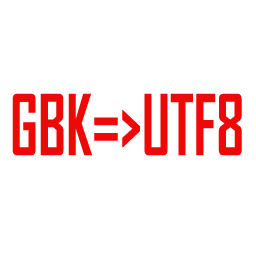
<style>
.page{position:relative;width:256px;height:256px;background:#ffffff}
.page>*{position:absolute;margin:0}
.t1{font:80px "AgencyFB-Bold";color:#ee0909;scale:0.75 1}
</style>
<div class="page">
<p class="t1" style="left:12px;top:93px;width:230px;height:63px">GBK=&gt;UTF8</p>
</div>
